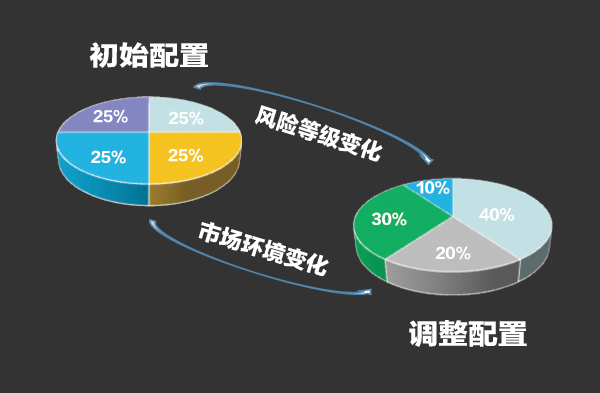
<style>
.page{position:relative;width:600px;height:393px;background:#333333}
.page>*{position:absolute;margin:0}
.t1{font:27.2px "FZLTTHK--GBK1-0";color:#ffffff;scale:1.1 1}
.t2{font:22.2px "FZLTTHK--GBK1-0";color:#ffffff}
.t3{font:28.3px "FZLTTHK--GBK1-0";color:#ffffff;scale:1.05 1}
</style>
<div class="page">
<p class="t1" style="left:89px;top:42px;width:119px;height:26px">初始配置</p>
<p class="t2" style="left:254px;top:105px;width:129px;height:57px;rotate:18deg">风险等级变化</p>
<p class="t2" style="left:198px;top:222px;width:131px;height:54px;rotate:17deg">市场环境变化</p>
<p class="t3" style="left:409px;top:320px;width:118px;height:27px">调整配置</p>
</div>
